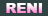
<style>
.page{position:relative;width:48px;height:16px;background:#314242}
.page>*{position:absolute;margin:0}
.t1{font:12.9px "Arial-Black";scale:1.07 1}
</style>
<div class="page">
<p class="t1" style="left:6px;top:3px;width:36px;height:10px">RENI</p>
</div>
